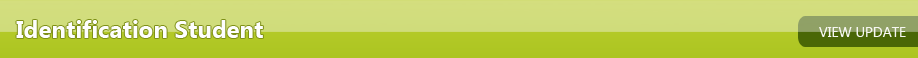
<style>
.page{position:relative;width:918px;height:58px}
.page>*{position:absolute;margin:0}
.t1{font:24px "SegoeUI-Bold";color:#fefefe}
.t2{font:14px "SegoeUI";color:#f6f7f1}
</style>
<div class="page">
<p class="t1" style="left:16px;top:20px;width:247px;height:18px">Identification Student</p>
<p class="t2" style="left:819px;top:27px;width:87px;height:10px">VIEW UPDATE</p>
</div>
